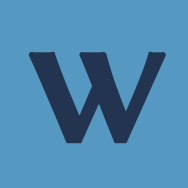
<style>
.page{position:relative;width:188px;height:188px;background:#5598c2}
.page>*{position:absolute;margin:0}
.t1{font:133px "LinuxBiolinumGB";color:#223450;font-weight:bold}
</style>
<div class="page">
<p class="t1" style="left:28px;top:51px;width:139px;height:93px">W</p>
</div>
